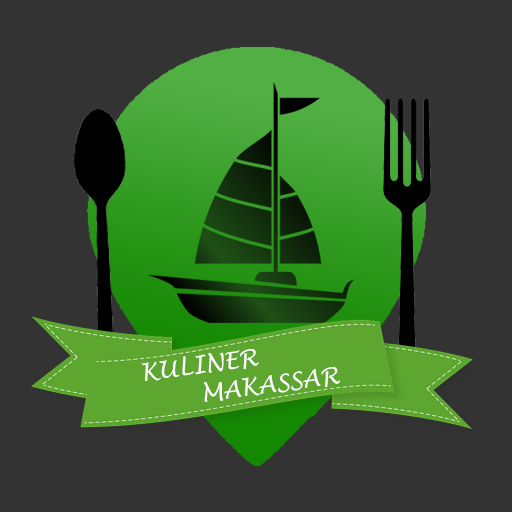
<style>
.page{position:relative;width:512px;height:512px;background:#333333}
.page>*{position:absolute;margin:0}
.t1{font:23.6px "LucidaHandwriting-Italic";color:#ffffff}
</style>
<div class="page">
<p class="t1" style="left:141px;top:349px;width:199px;height:53px;text-align:center;rotate:-8deg">KULINER <br>                MAKASSAR</p>
</div>
